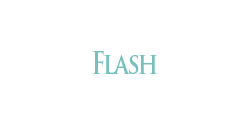
<style>
.page{position:relative;width:251px;height:130px;background:#ffffff}
.page>*{position:absolute;margin:0}
.t1{font:29.7px "TrajanPro-Bold";letter-spacing:-0.075em;color:#78c0bd;scale:0.79 1}
</style>
<div class="page">
<p class="t1" style="left:92px;top:51px;width:65px;height:23px">Flash</p>
</div>
